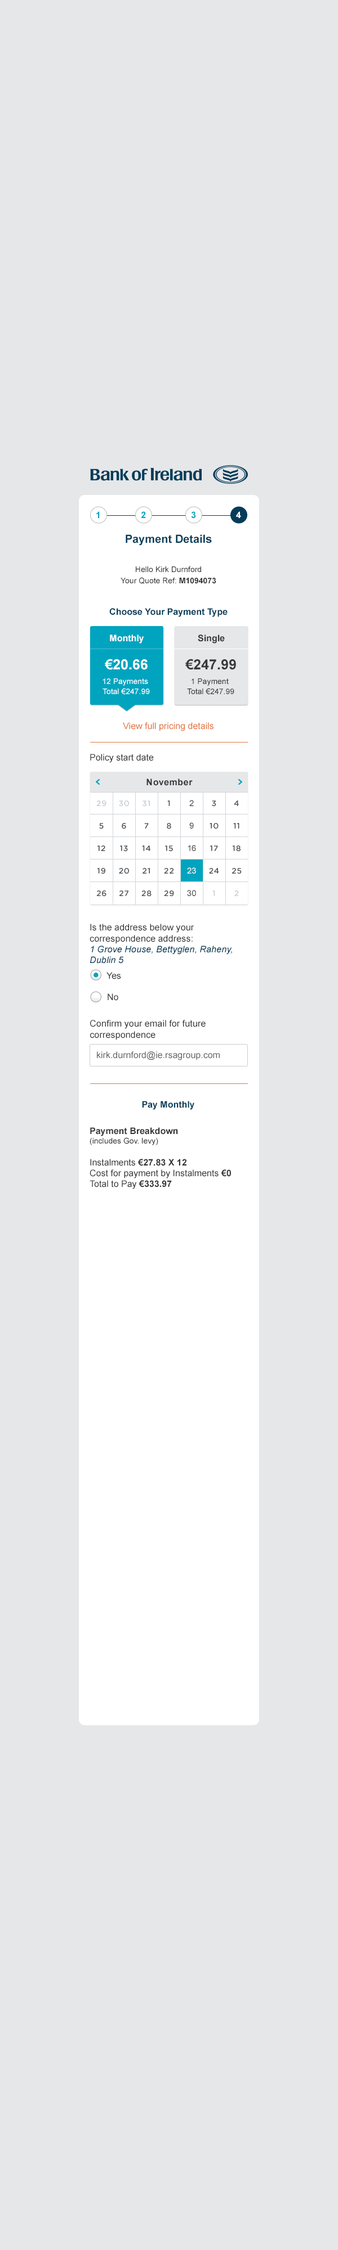
<style>
.page{position:relative;width:338px;height:2250px;background:#e6e7e9}
.page>*{position:absolute;margin:0}
.t1{font:9px "Arial-BoldMT";color:#00a4bf}
.t2{font:9px "Arial-BoldMT";color:#ffffff}
.t3{font:11.2px "Arial-BoldMT";color:#053c59}
.t4{font:7.9px/11.2px "ArialMT";color:#343435}
.t5{font:7.9px/11.2px "Arial-BoldMT";color:#343435}
.t6{font:9px "Arial-BoldMT";color:#053c59}
.t7{font:9px "Arial-BoldMT";color:#343435}
.t8{font:14.1px "Arial-BoldMT";color:#ffffff}
.t9{font:14.1px "Arial-BoldMT";color:#343435}
.t10{font:7.9px/10.1px "ArialMT";color:#ffffff}
.t11{font:7.9px/10.1px "ArialMT";color:#343435}
.t12{font:9px "ArialMT";color:#e4753f}
.t13{font:9px "ArialMT";color:#343435}
.t14{font:9px "Arial-BoldMT";letter-spacing:0.03em;color:#343435}
.t15{font:7.9px/22.5px "GothamRounded-Medium";letter-spacing:0.03em;color:#4d5155;text-transform:uppercase}
.t16{font:7.9px/22.5px "GothamRounded-Medium";letter-spacing:0.03em;color:#cccfd3;text-transform:uppercase}
.t17{font:8.4px/22.5px "ArialMT";letter-spacing:0.03em;color:#343435;text-transform:uppercase}
.t18{font:8.4px/22.5px "ArialMT";letter-spacing:0.03em;color:#ffffff;text-transform:uppercase}
.t19{font:9px "Arial-ItalicMT";color:#053c59}
.t20{font:9px "ArialMT";color:#666666}
.t21{font:7.9px "ArialMT";color:#343435}
</style>
<div class="page">
<p class="t1" style="left:96px;top:511px;width:4px;height:7px">1</p>
<p class="t1" style="left:141px;top:511px;width:5px;height:7px">2</p>
<p class="t1" style="left:191px;top:511px;width:5px;height:8px">3</p>
<p class="t2" style="left:236px;top:511px;width:5px;height:7px">4</p>
<p class="t3" style="left:125px;top:534px;width:87px;height:12px">Payment Details</p>
<p class="t4" style="left:120px;top:566px;width:96px;height:18px;text-align:center">Hello Kirk Durnford<br>Your Quote Ref: <span class="t5">M1094073</span></p>
<p class="t6" style="left:109px;top:608px;width:118px;height:9px">Choose Your Payment Type</p>
<p class="t2" style="left:110px;top:634px;width:33px;height:10px">Monthly</p>
<p class="t7" style="left:197px;top:634px;width:27px;height:10px">Single</p>
<p class="t8" style="left:105px;top:659px;width:42px;height:11px">€20.66</p>
<p class="t9" style="left:185px;top:659px;width:51px;height:11px">€247.99</p>
<p class="t10" style="left:102px;top:678px;width:48px;height:17px;text-align:center">12 Payments <br>Total €247.99</p>
<p class="t11" style="left:187px;top:678px;width:47px;height:17px;text-align:center">1 Payment <br>Total €247.99</p>
<p class="t12" style="left:123px;top:722px;width:90px;height:9px">View full pricing details</p>
<p class="t13" style="left:90px;top:754px;width:64px;height:9px">Policy start date</p>
<p class="t14" style="left:146px;top:778px;width:46px;height:8px">November</p>
<p class="t15" style="left:96px;top:800px;width:10px;height:97px;text-align:center"><span class="t16">29<br></span>5<br>12<br>19<br>26</p>
<p class="t15" style="left:119px;top:800px;width:10px;height:96px;text-align:center"><span class="t16">30<br></span>6<br>13<br>20<br>27</p>
<p class="t15" style="left:141px;top:800px;width:10px;height:97px;text-align:center"><span class="t16">31<br></span>7<br>14<br>21<br>28</p>
<p class="t15" style="left:164px;top:800px;width:10px;height:97px;text-align:center">1<br>8<br>15<br>22<br>29</p>
<p class="t17" style="left:187px;top:800px;width:9px;height:96px;text-align:center">2<br>9<br>16<br><span class="t18">23<br></span>30</p>
<p class="t15" style="left:209px;top:800px;width:10px;height:96px;text-align:center">3<br>10<br>17<br>24<br><span class="t16">1</span></p>
<p class="t15" style="left:231px;top:800px;width:10px;height:96px;text-align:center">4<br>11<br>18<br>25<br><span class="t16">2</span></p>
<p class="t13" style="left:89px;top:924px;width:143px;height:40px">Is the address below your correspondence address:<br><span class="t19">1 Grove House, Bettyglen, Raheny, Dublin 5</span></p>
<p class="t13" style="left:106px;top:972px;width:15px;height:7px">Yes</p>
<p class="t13" style="left:107px;top:993px;width:11px;height:8px">No</p>
<p class="t13" style="left:90px;top:1020px;width:115px;height:20px">Confirm your email for future correspondence</p>
<p class="t20" style="left:97px;top:1051px;width:122px;height:9px">kirk.durnford@ie.rsagroup.com</p>
<p class="t6" style="left:142px;top:1101px;width:52px;height:9px">Pay Monthly</p>
<p class="t13" style="left:89px;top:1127px;width:142px;height:62px"><span class="t7">Payment Breakdown<br></span><span class="t21">(includes Gov. levy) <br></span><br>Instalments <span class="t7">€27.83 X 12<br></span>Cost for payment by Instalments <span class="t7">€0<br></span>Total to Pay <span class="t7">€333.97</span></p>
</div>
